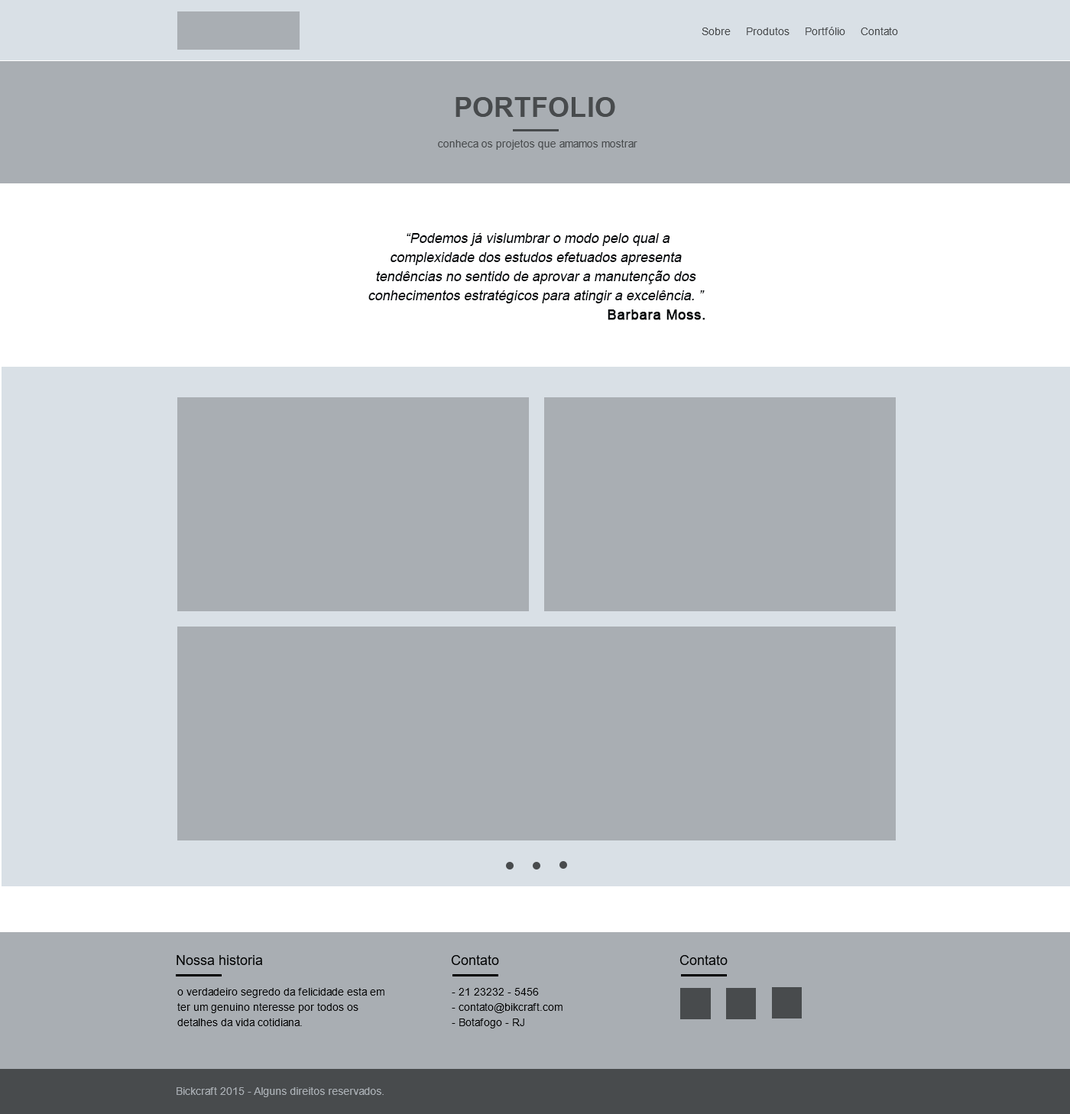
<style>
.page{position:relative;width:1070px;height:1114px;background:#a9aeb3}
.page>*{position:absolute;margin:0}
.t1{font:10.7px "ArialMT";color:#484b4d}
.t2{font:27.5px "Arial-BoldMT";color:#484b4d;text-transform:uppercase}
.t3{font:13.8px/19.1px "ArialMT";color:#000306;font-style:italic}
.t4{font:13.8px/19.1px "ArialMT";color:#000306;font-weight:bold}
.t5{font:13.8px "ArialMT";color:#000101}
.t6{font:10.7px/15.3px "ArialMT";color:#000000}
.t7{font:10.7px "ArialMT";color:#a9aeb3}
</style>
<div class="page">
<p class="t1" style="left:702px;top:27px;width:196px;height:8px">Sobre     Produtos     Portfólio     Contato</p>
<p class="t2" style="left:456px;top:97px;width:159px;height:20px">PORTFOLIO</p>
<p class="t1" style="left:438px;top:140px;width:199px;height:10px">conheca os projetos que amamos mostrar</p>
<p class="t3" style="left:368px;top:233px;width:337px;height:87px;text-align:center">“Podemos já vislumbrar o modo pelo qual a complexidade dos estudos efetuados apresenta tendências no sentido de aprovar a manutenção dos conhecimentos estratégicos para atingir a excelência. ”<br><span class="t4">Barbara Moss.</span></p>
<p class="t5" style="left:177px;top:955px;width:86px;height:10px">Nossa historia</p>
<p class="t5" style="left:451px;top:955px;width:48px;height:10px">Contato</p>
<p class="t5" style="left:679px;top:955px;width:49px;height:10px">Contato</p>
<p class="t6" style="left:177px;top:988px;width:207px;height:38px">o verdadeiro segredo da felicidade esta em ter um genuino nteresse por todos os detalhes da vida cotidiana.</p>
<p class="t6" style="left:452px;top:988px;width:111px;height:41px">- 21 23232 - 5456<br>- contato@bikcraft.com<br>- Botafogo - RJ</p>
<p class="t7" style="left:177px;top:1088px;width:207px;height:10px">Bickcraft 2015 - Alguns direitos reservados.</p>
</div>
